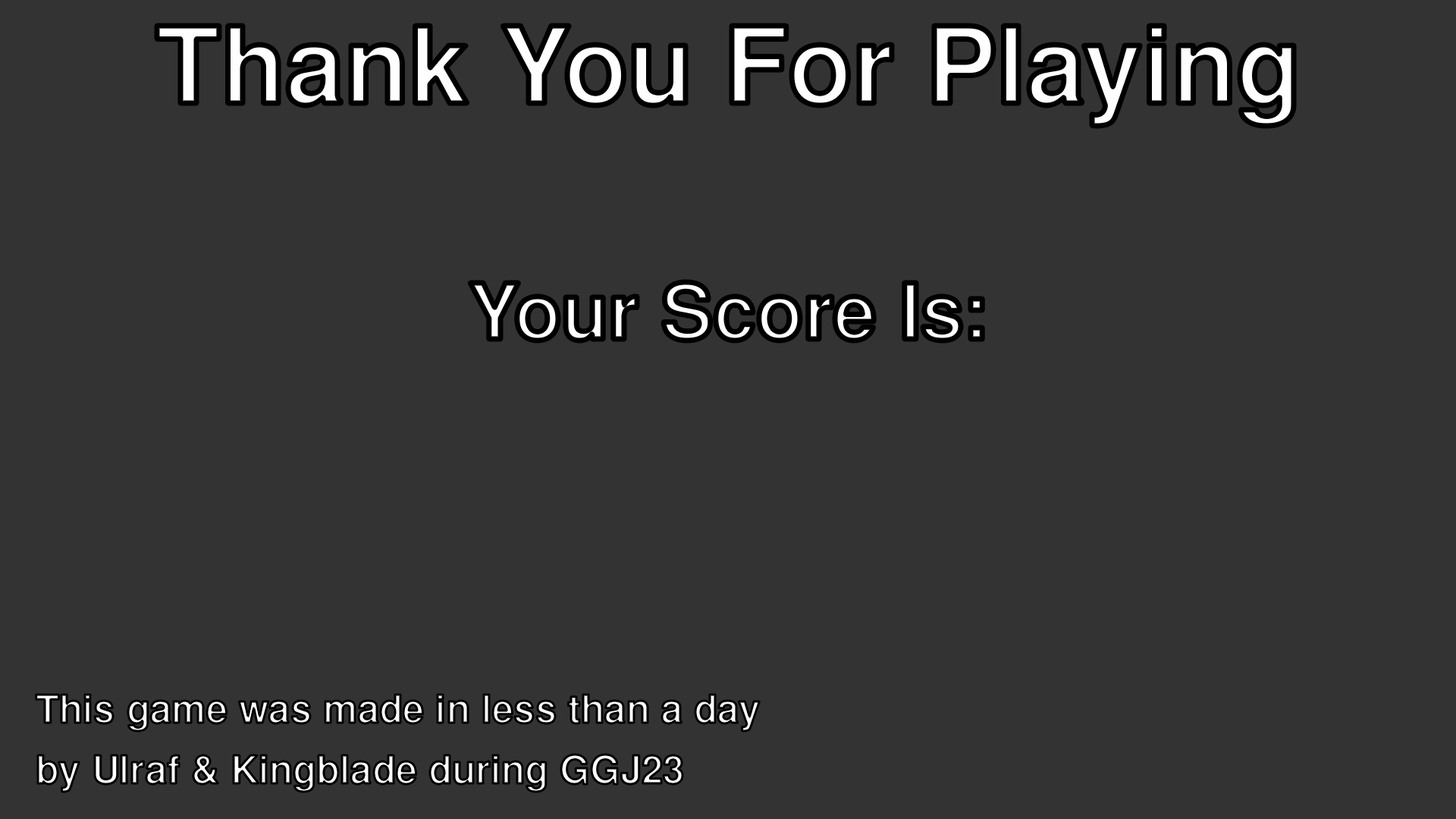
<style>
.page{position:relative;width:1456px;height:819px;background:#333333}
.page>*{position:absolute;margin:0}
.t1{font:115.9px "NachlieliCLM-Bold"}
.t2{font:84.3px "NachlieliCLM-Bold"}
.t3{font:42.1px "NachlieliCLM-Bold"}
</style>
<div class="page">
<p class="t1" style="left:157px;top:26px;width:1137px;height:100px">Thank You For Playing</p>
<p class="t2" style="left:470px;top:282px;width:513px;height:59px">Your Score Is:</p>
<p class="t3" style="left:36px;top:695px;width:724px;height:97px">This game was made in less than a day<br>by Ulraf &amp; Kingblade during GGJ23</p>
</div>
